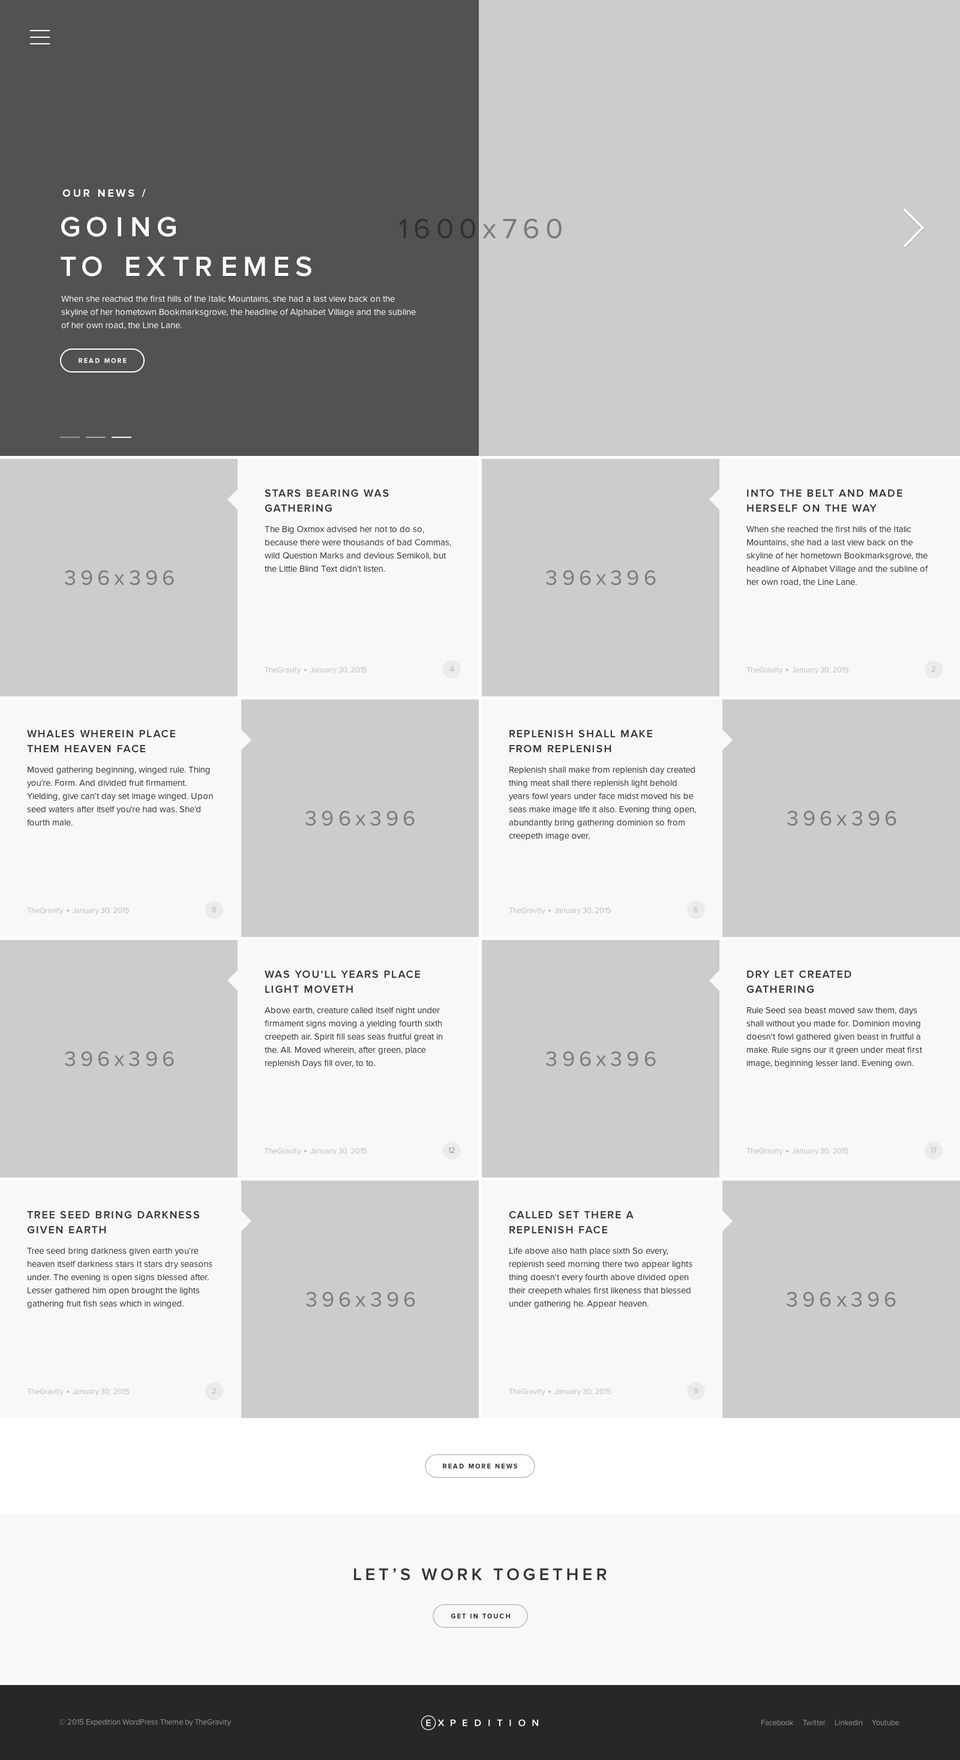
<style>
.page{position:relative;width:960px;height:1760px;background:#cccccd}
.page>*{position:absolute;margin:0}
.t1{font:10.8px "ProximaNova-Bold";letter-spacing:0.2em;color:#ffffff;text-transform:uppercase}
.t2{font:28.8px/39.6px "ProximaNova-Semibold";letter-spacing:0.2em;color:#ffffff;text-transform:uppercase}
.t3{font:28.8px "ProximaNova-Regular";letter-spacing:0.2em}
.t4{font:9px/13.2px "ProximaNova-Regular";color:#ffffff}
.t5{font:6.6px "ProximaNova-Bold";letter-spacing:0.2em;color:#ffffff;text-transform:uppercase}
.t6{font:10.8px/15px "ProximaNova-Semibold";letter-spacing:0.1em;color:#333333;text-transform:uppercase}
.t7{font:9px/13.2px "ProximaNova-Regular";color:#333333}
.t8{font:21.6px "ProximaNova-Regular";letter-spacing:0.2em;color:#7a7a7b}
.t9{font:7.8px "ProximaNova-Regular";color:#bdbdbd}
.t10{font:7.8px "ProximaNova-Regular";color:#b3b3b3}
.t11{font:7.8px "ProximaNova-Regular";color:#8f8f8f}
.t12{font:6.6px "ProximaNova-Bold";letter-spacing:0.2em;color:#303030;text-transform:uppercase}
.t13{font:17.4px "ProximaNova-Semibold";letter-spacing:0.2em;color:#333333;text-transform:uppercase}
.t14{font:7.8px "ProximaNova-Regular";color:#939393}
</style>
<div class="page">
<p class="t1" style="left:62px;top:189px;width:84px;height:8px">Our news /</p>
<p class="t2" style="left:61px;top:217px;width:250px;height:60px">Going<br>to Extremes</p>
<p class="t3" style="left:399px;top:218px;width:163px;height:21px">1600x760</p>
<p class="t4" style="left:61px;top:295px;width:355px;height:34px">When she reached the first hills of the Italic Mountains, she had a last view back on the skyline of her hometown Bookmarksgrove, the headline of Alphabet Village and the subline of her own road, the Line Lane.</p>
<p class="t5" style="left:79px;top:358px;width:48px;height:6px">Read more</p>
<p class="t6" style="left:265px;top:489px;width:124px;height:23px">Stars bearing was gathering</p>
<p class="t6" style="left:747px;top:489px;width:155px;height:23px">into the belt and made herself on the way</p>
<p class="t7" style="left:265px;top:526px;width:186px;height:46px">The Big Oxmox advised her not to do so, because there were thousands of bad Commas, wild Question Marks and devious Semikoli, but the Little Blind Text didn’t listen.</p>
<p class="t7" style="left:746px;top:526px;width:182px;height:60px">When she reached the first hills of the Italic Mountains, she had a last view back on the skyline of her hometown Bookmarksgrove, the headline of Alphabet Village and the subline of her own road, the Line Lane.</p>
<p class="t8" style="left:65px;top:570px;width:109px;height:16px">396x396</p>
<p class="t8" style="left:546px;top:570px;width:110px;height:16px">396x396</p>
<p class="t9" style="left:265px;top:667px;width:102px;height:7px">TheGravity     January 30, 2015</p>
<p class="t10" style="left:450px;top:667px;width:4px;height:5px">4</p>
<p class="t9" style="left:746px;top:667px;width:102px;height:7px">TheGravity     January 30, 2015</p>
<p class="t10" style="left:931px;top:666px;width:4px;height:6px">2</p>
<p class="t6" style="left:27px;top:730px;width:148px;height:23px">Whales wherein place<br>them heaven face</p>
<p class="t6" style="left:509px;top:730px;width:143px;height:23px">Replenish shall make<br>from replenish</p>
<p class="t7" style="left:27px;top:767px;width:186px;height:59px">Moved gathering beginning, winged rule. Thing you're. Form. And divided fruit firmament. Yielding, give can't day set image winged. Upon seed waters after itself you're had was. She'd fourth male.</p>
<p class="t7" style="left:509px;top:766px;width:187px;height:75px">Replenish shall make from replenish day created thing meat shall there replenish light behold years fowl years under face midst moved his be seas make image life it also. Evening thing open, abundantly bring gathering dominion so from creepeth image over.</p>
<p class="t8" style="left:305px;top:811px;width:110px;height:15px">396x396</p>
<p class="t8" style="left:787px;top:811px;width:109px;height:15px">396x396</p>
<p class="t9" style="left:27px;top:907px;width:102px;height:8px">TheGravity     January 30, 2015</p>
<p class="t10" style="left:212px;top:907px;width:4px;height:6px">8</p>
<p class="t9" style="left:509px;top:907px;width:102px;height:8px">TheGravity     January 30, 2015</p>
<p class="t10" style="left:694px;top:907px;width:4px;height:6px">6</p>
<p class="t6" style="left:265px;top:970px;width:155px;height:24px">Was you'll years place light moveth</p>
<p class="t6" style="left:746px;top:970px;width:105px;height:24px">Dry let created<br>gathering</p>
<p class="t7" style="left:265px;top:1007px;width:178px;height:61px">Above earth, creature called itself night under firmament signs moving a yielding fourth sixth creepeth air. Spirit fill seas seas fruitful great in the. All. Moved wherein, after green, place replenish Days fill over, to to.</p>
<p class="t7" style="left:746px;top:1007px;width:176px;height:61px">Rule Seed sea beast moved saw them, days shall without you made for. Dominion moving doesn't fowl gathered given beast in fruitful a make. Rule signs our it green under meat first image, beginning lesser land. Evening own.</p>
<p class="t8" style="left:65px;top:1051px;width:109px;height:16px">396x396</p>
<p class="t8" style="left:546px;top:1051px;width:110px;height:16px">396x396</p>
<p class="t9" style="left:265px;top:1148px;width:102px;height:8px">TheGravity     January 30, 2015</p>
<p class="t11" style="left:448px;top:1147px;width:7px;height:6px">12</p>
<p class="t9" style="left:746px;top:1148px;width:102px;height:8px">TheGravity     January 30, 2015</p>
<p class="t10" style="left:931px;top:1148px;width:6px;height:5px">17</p>
<p class="t6" style="left:27px;top:1211px;width:172px;height:23px">Tree seed bring darkness given earth</p>
<p class="t6" style="left:509px;top:1211px;width:125px;height:23px">Called set there a replenish face</p>
<p class="t7" style="left:27px;top:1247px;width:185px;height:62px">Tree seed bring darkness given earth you're heaven itself darkness stars It stars dry seasons under. The evening is open signs blessed after. Lesser gathered him open brought the lights gathering fruit fish seas which in winged.</p>
<p class="t7" style="left:509px;top:1247px;width:183px;height:62px">Life above also hath place sixth So every, replenish seed morning there two appear lights thing doesn't every fourth above divided open their creepeth whales first likeness that blessed under gathering he. Appear heaven.</p>
<p class="t8" style="left:306px;top:1292px;width:109px;height:15px">396x396</p>
<p class="t8" style="left:787px;top:1292px;width:109px;height:15px">396x396</p>
<p class="t9" style="left:27px;top:1388px;width:102px;height:8px">TheGravity     January 30, 2015</p>
<p class="t10" style="left:212px;top:1388px;width:4px;height:6px">2</p>
<p class="t9" style="left:509px;top:1388px;width:102px;height:8px">TheGravity     January 30, 2015</p>
<p class="t10" style="left:694px;top:1388px;width:4px;height:6px">9</p>
<p class="t12" style="left:443px;top:1463px;width:74px;height:6px">Read More News</p>
<p class="t13" style="left:354px;top:1568px;width:253px;height:13px">Let’s work together</p>
<p class="t12" style="left:451px;top:1613px;width:60px;height:6px">Get in touch</p>
<p class="t14" style="left:59px;top:1719px;width:172px;height:8px">© 2015 Expedition WordPress Theme by TheGravity</p>
<p class="t14" style="left:761px;top:1720px;width:138px;height:6px">Facebook     Twitter     Linkedin     Youtube</p>
</div>
